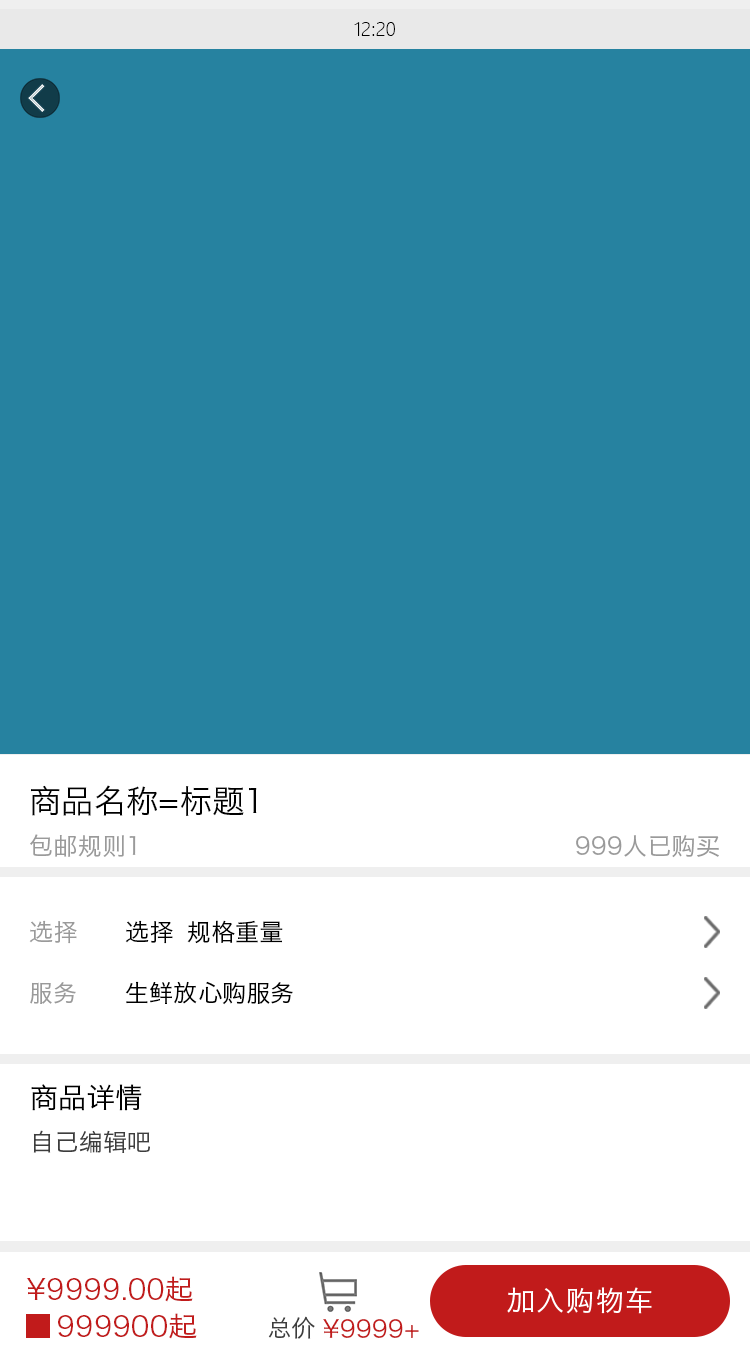
<style>
.page{position:relative;width:750px;height:1350px;background:#2682a0}
.page>*{position:absolute;margin:0}
.t1{font:18px "MicrosoftYaHeiLight";color:#000000}
.t2{font:32px "HiraginoSansGB-W3";color:#000000}
.t3{font:24px "HiraginoSansGB-W3";color:#9a9a9a}
.t4{font:24px "HiraginoSansGB-W3";color:#000000}
.t5{font:28px "HiraginoSansGB-W3";color:#000000}
.t6{font:24px "HiraginoSansGB-W3";color:#3d3d3d}
.t7{font:28px "HiraginoSansGB-W3";color:#c11b1b}
.t8{font:24px "HiraginoSansGB-W3";color:#c11b1b}
</style>
<div class="page">
<p class="t1" style="left:354px;top:22px;width:41px;height:14px">12:20</p>
<p class="t2" style="left:31px;top:785px;width:226px;height:31px">商品名称=标题1</p>
<p class="t3" style="left:30px;top:834px;width:106px;height:24px">包邮规则1</p>
<p class="t3" style="left:576px;top:835px;width:143px;height:23px">999人已购买</p>
<p class="t3" style="left:29px;top:920px;width:48px;height:24px">选择</p>
<p class="t4" style="left:125px;top:920px;width:158px;height:24px">选择  规格重量</p>
<p class="t3" style="left:30px;top:982px;width:46px;height:22px">服务</p>
<p class="t4" style="left:125px;top:981px;width:168px;height:24px">生鲜放心购服务</p>
<p class="t5" style="left:31px;top:1084px;width:111px;height:27px">商品详情</p>
<p class="t6" style="left:33px;top:1130px;width:117px;height:23px">自己编辑吧</p>
<p class="t7" style="left:26px;top:1276px;width:167px;height:26px">¥9999.00起</p>
<p class="t7" style="left:58px;top:1313px;width:139px;height:26px">999900起</p>
<p class="t6" style="left:268px;top:1316px;width:47px;height:23px">总价</p>
<p class="t8" style="left:323px;top:1319px;width:96px;height:19px">¥9999+</p>
</div>
